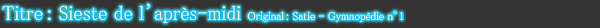
<style>
.page{position:relative;width:600px;height:28px;background:#333333}
.page>*{position:absolute;margin:0}
.t1{font:11.2px "MS-PMincho";color:#ffffff}
.t2{font:20px "MS-PMincho";color:#ffffff}
.t3{font:11.2px "MS-PMincho";letter-spacing:-0.5em;color:#ffffff}
</style>
<div class="page">
<p class="t1" style="left:2px;top:3px;width:402px;height:20px"><span class="t2">Titre : Sieste de l’après-midi </span>Original : Satie - Gymnopédie n<span class="t3">°1</span></p>
</div>
